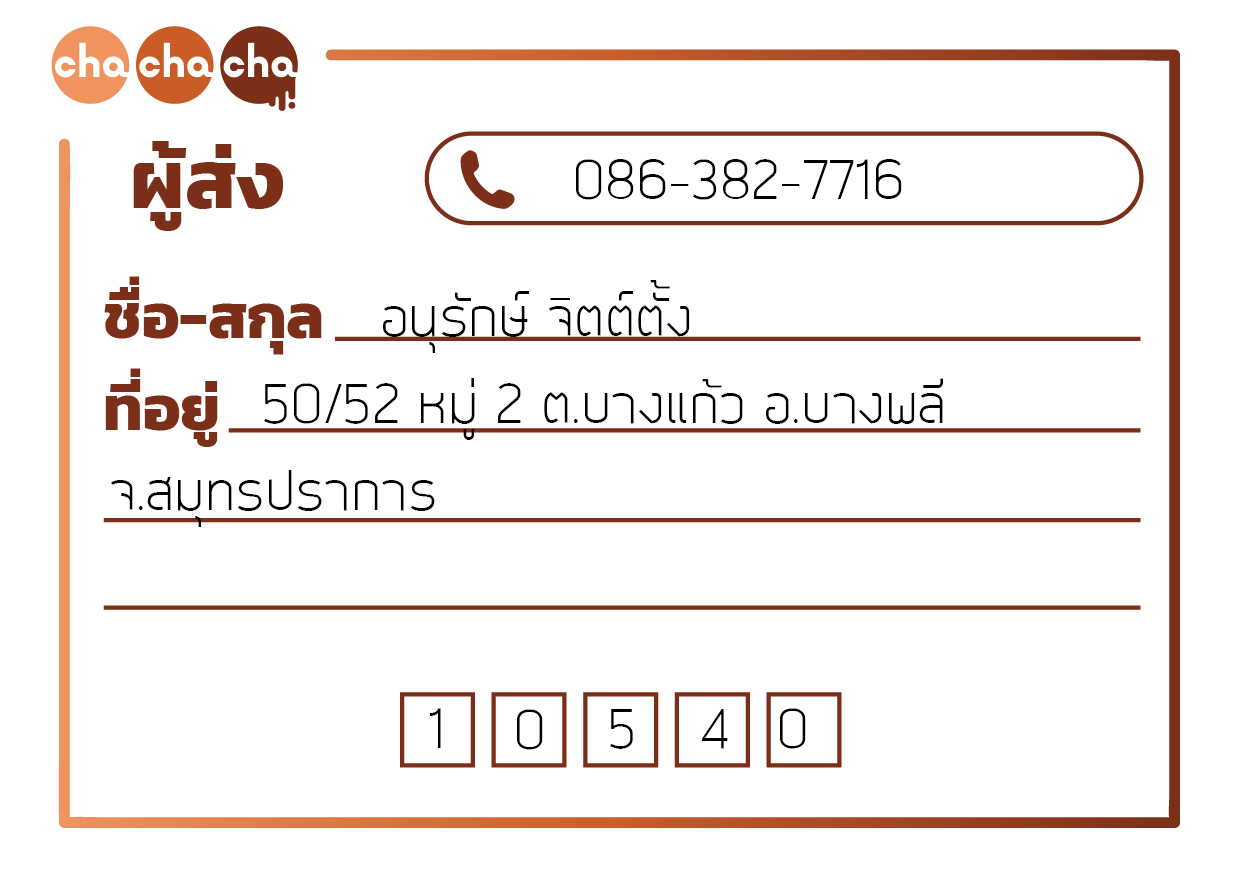
<style>
.page{position:relative;width:1241px;height:874px;background:#ffffff}
.page>*{position:absolute;margin:0}
.t1{font:50px "EkkamaiNew-Regular";color:#000000}
</style>
<div class="page">
<p class="t1" style="left:576px;top:159px;width:326px;height:41px">086-382-7716</p>
<p class="t1" style="left:383px;top:280px;width:307px;height:73px">อนุรักษ์ จิตต์ตั้ง</p>
<p class="t1" style="left:264px;top:378px;width:679px;height:62px">50/52 หมู่ 2 ต.บางแก้ว อ.บางพลี</p>
<p class="t1" style="left:111px;top:470px;width:324px;height:57px">จ.สมุทรปราการ</p>
<p class="t1" style="left:429px;top:708px;width:12px;height:40px">1</p>
<p class="t1" style="left:517px;top:709px;width:26px;height:41px">0</p>
<p class="t1" style="left:610px;top:709px;width:23px;height:40px">5</p>
<p class="t1" style="left:702px;top:709px;width:26px;height:40px">4</p>
<p class="t1" style="left:780px;top:708px;width:26px;height:41px">0</p>
</div>
